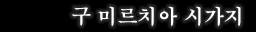
<style>
.page{position:relative;width:256px;height:32px;background:#000000}
.page>*{position:absolute;margin:0}
.t1{font:20px "H2mjrE";color:#ffffff}
</style>
<div class="page">
<p class="t1" style="left:72px;top:6px;width:169px;height:20px">구 미르치아 시가지</p>
</div>
